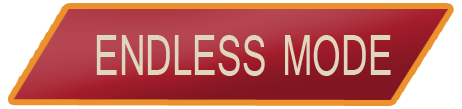
<style>
.page{position:relative;width:462px;height:109px}
.page>*{position:absolute;margin:0}
.t1{font:59.7px "Shruti";color:#ded7bd;scale:0.67 1}
</style>
<div class="page">
<p class="t1" style="left:96px;top:35px;width:295px;height:41px">ENDLESS MODE</p>
</div>
